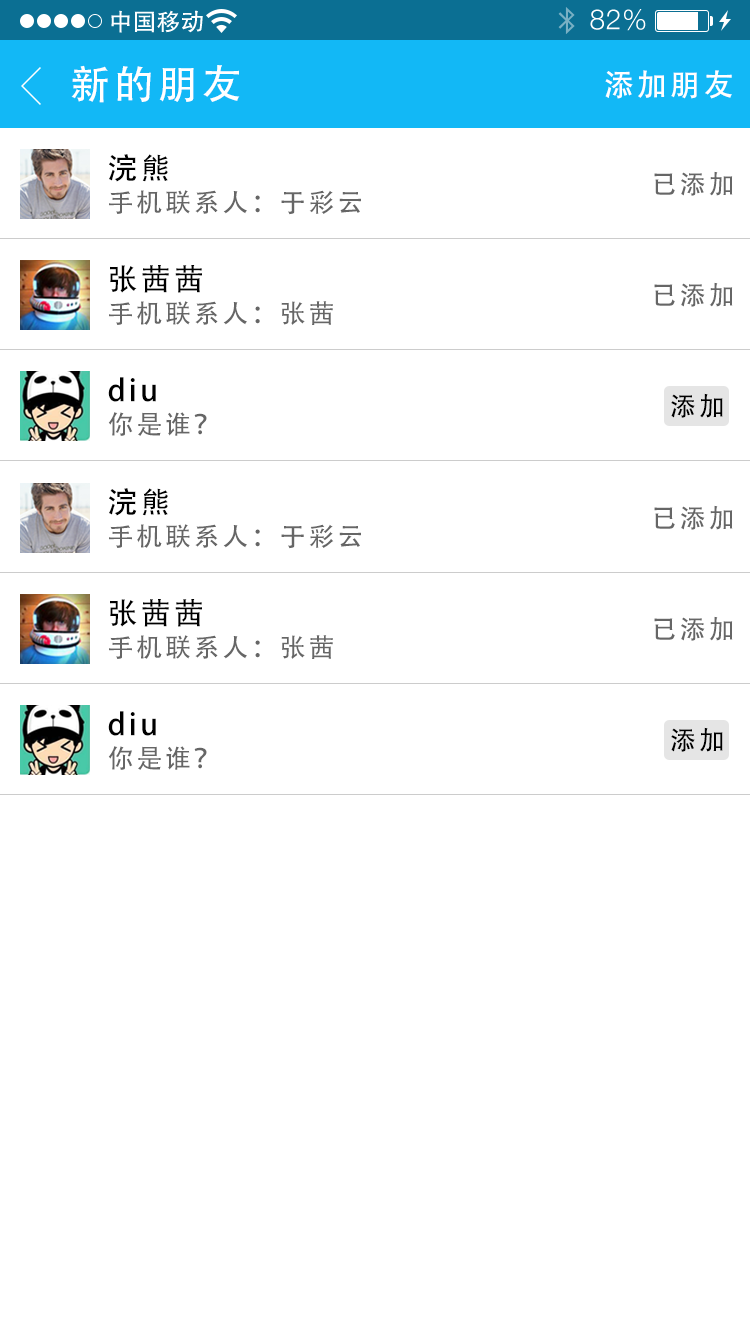
<style>
.page{position:relative;width:750px;height:1334px;background:#ffffff}
.page>*{position:absolute;margin:0}
.t1{font:40px "AdobeHeitiStd-Regular";letter-spacing:0.104em;color:#ffffff}
.t2{font:30px "AdobeHeitiStd-Regular";letter-spacing:0.104em;color:#ffffff}
.t3{font:30px "AdobeHeitiStd-Regular";letter-spacing:0.104em;color:#000000}
.t4{font:26px "AdobeHeitiStd-Regular";letter-spacing:0.104em;color:#666666}
.t5{font:26px "AdobeHeitiStd-Regular";letter-spacing:0.104em;color:#000000}
</style>
<div class="page">
<p class="t1" style="left:71px;top:65px;width:169px;height:38px">新的朋友</p>
<p class="t2" style="left:605px;top:70px;width:127px;height:29px">添加朋友</p>
<p class="t3" style="left:109px;top:154px;width:59px;height:28px">浣熊</p>
<p class="t4" style="left:654px;top:171px;width:79px;height:25px">已添加</p>
<p class="t4" style="left:109px;top:190px;width:252px;height:25px">手机联系人：于彩云</p>
<p class="t3" style="left:110px;top:265px;width:92px;height:28px">张茜茜</p>
<p class="t4" style="left:654px;top:282px;width:79px;height:25px">已添加</p>
<p class="t4" style="left:109px;top:301px;width:224px;height:24px">手机联系人：张茜</p>
<p class="t3" style="left:108px;top:377px;width:48px;height:25px">diu</p>
<p class="t5" style="left:671px;top:393px;width:52px;height:25px">添加</p>
<p class="t4" style="left:108px;top:412px;width:99px;height:24px">你是谁？</p>
<p class="t3" style="left:109px;top:488px;width:59px;height:28px">浣熊</p>
<p class="t4" style="left:654px;top:505px;width:79px;height:25px">已添加</p>
<p class="t4" style="left:109px;top:524px;width:252px;height:25px">手机联系人：于彩云</p>
<p class="t3" style="left:110px;top:599px;width:92px;height:28px">张茜茜</p>
<p class="t4" style="left:654px;top:616px;width:79px;height:25px">已添加</p>
<p class="t4" style="left:109px;top:635px;width:224px;height:24px">手机联系人：张茜</p>
<p class="t3" style="left:108px;top:711px;width:48px;height:25px">diu</p>
<p class="t5" style="left:671px;top:727px;width:52px;height:25px">添加</p>
<p class="t4" style="left:108px;top:746px;width:99px;height:24px">你是谁？</p>
</div>
